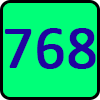
<style>
.page{position:relative;width:100px;height:100px;background:#00ff78}
.page>*{position:absolute;margin:0}
.t1{font:60px "Calibri";color:#20039f;font-weight:bold}
</style>
<div class="page">
<p class="t1" style="left:4px;top:28px;width:92px;height:41px">768</p>
</div>
